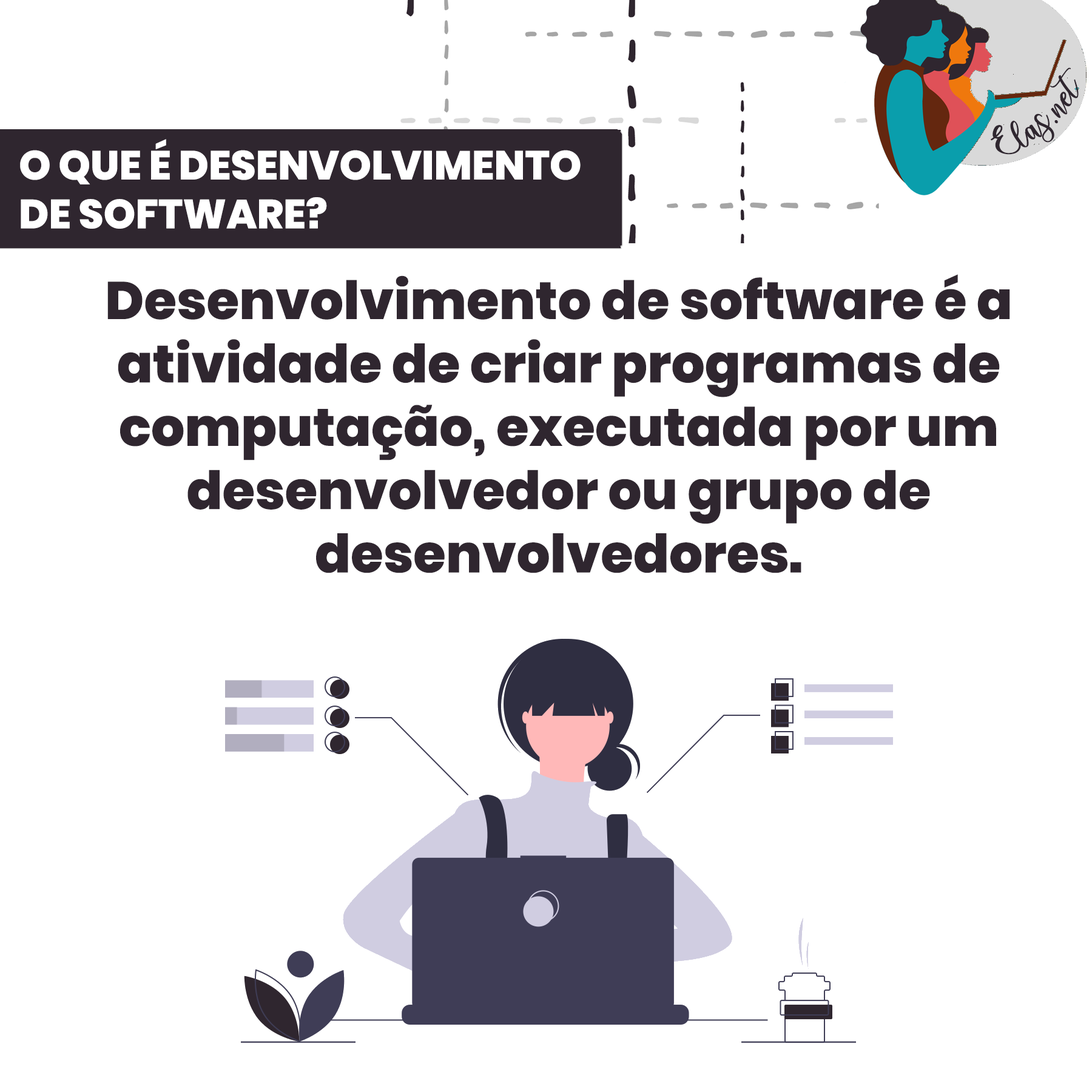
<style>
.page{position:relative;width:1092px;height:1092px;background:#ffffff}
.page>*{position:absolute;margin:0}
.t1{font:25px "charlinda-Regular";color:#2f262f;scale:1.18 1}
.t2{font:40.6px "Poppins-ExtraBold";color:#ffffff;text-transform:uppercase}
.t3{font:52.8px "Poppins-ExtraBold";color:#2f262f}
</style>
<div class="page">
<p class="t1" style="left:991px;top:67px;width:88px;height:88px;rotate:-42deg">Elas.net</p>
<p class="t2" style="left:20px;top:139px;width:561px;height:90px">O que é desenvolvimento<br>de software?</p>
<p class="t3" style="left:107px;top:274px;width:903px;height:299px;text-align:center">Desenvolvimento de software é a<br>atividade de criar programas de<br>computação, executada por um<br>desenvolvedor ou grupo de<br>desenvolvedores.</p>
</div>
